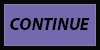
<style>
.page{position:relative;width:100px;height:50px;background:#7469af}
.page>*{position:absolute;margin:0}
.t1{font:17.4px "MyriadPro-BoldIt";color:#000000}
</style>
<div class="page">
<p class="t1" style="left:10px;top:18px;width:80px;height:12px">CONTINUE</p>
</div>
